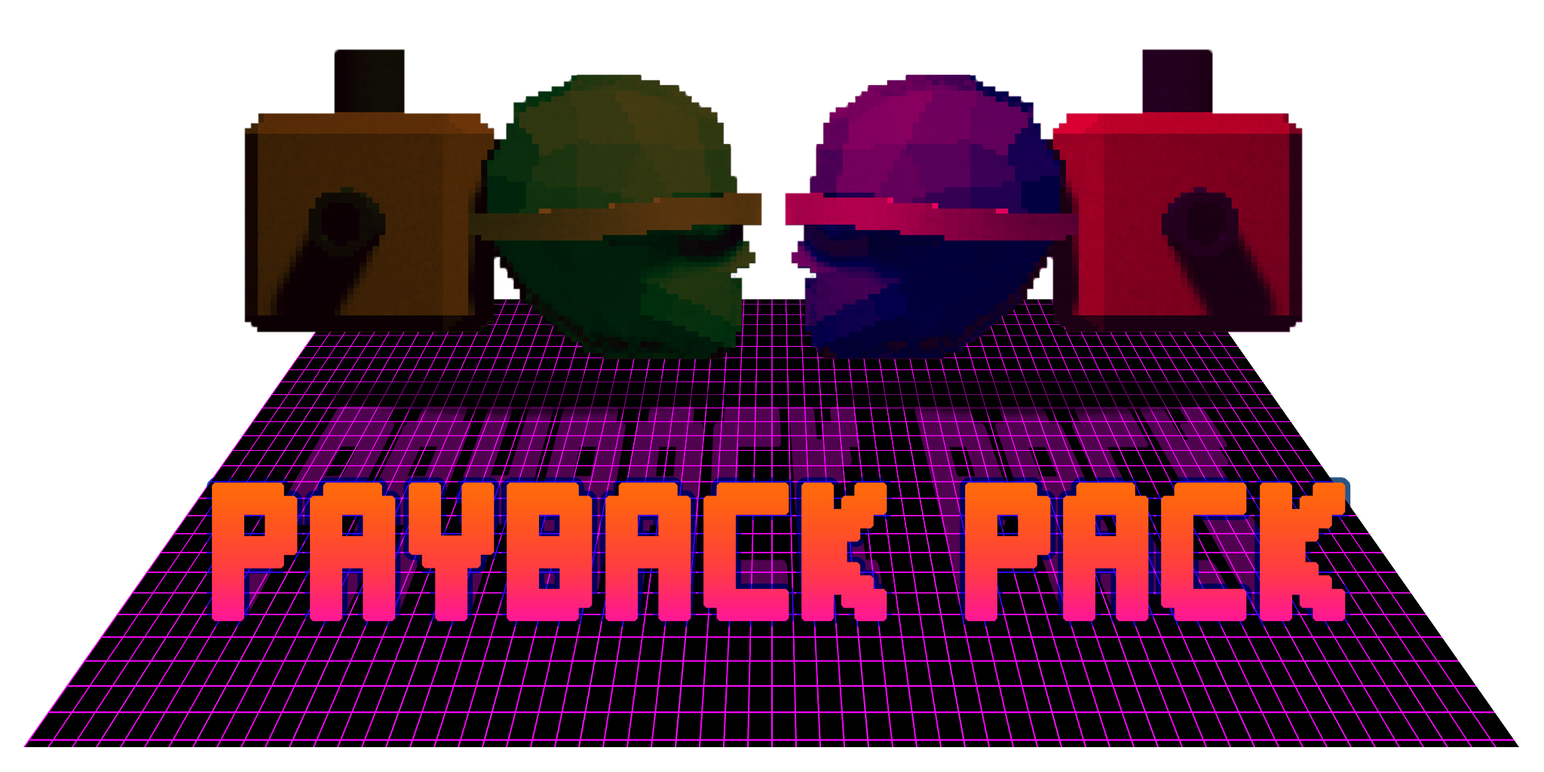
<style>
.page{position:relative;width:1544px;height:772px;background:#ffffff}
.page>*{position:absolute;margin:0}
.t1{font:302.4px "Pic0";font-variant:small-caps;font-weight:bold}
</style>
<div class="page">
<p class="t1" style="left:212px;top:483px;width:1134px;height:138px">payback pack</p>
</div>
